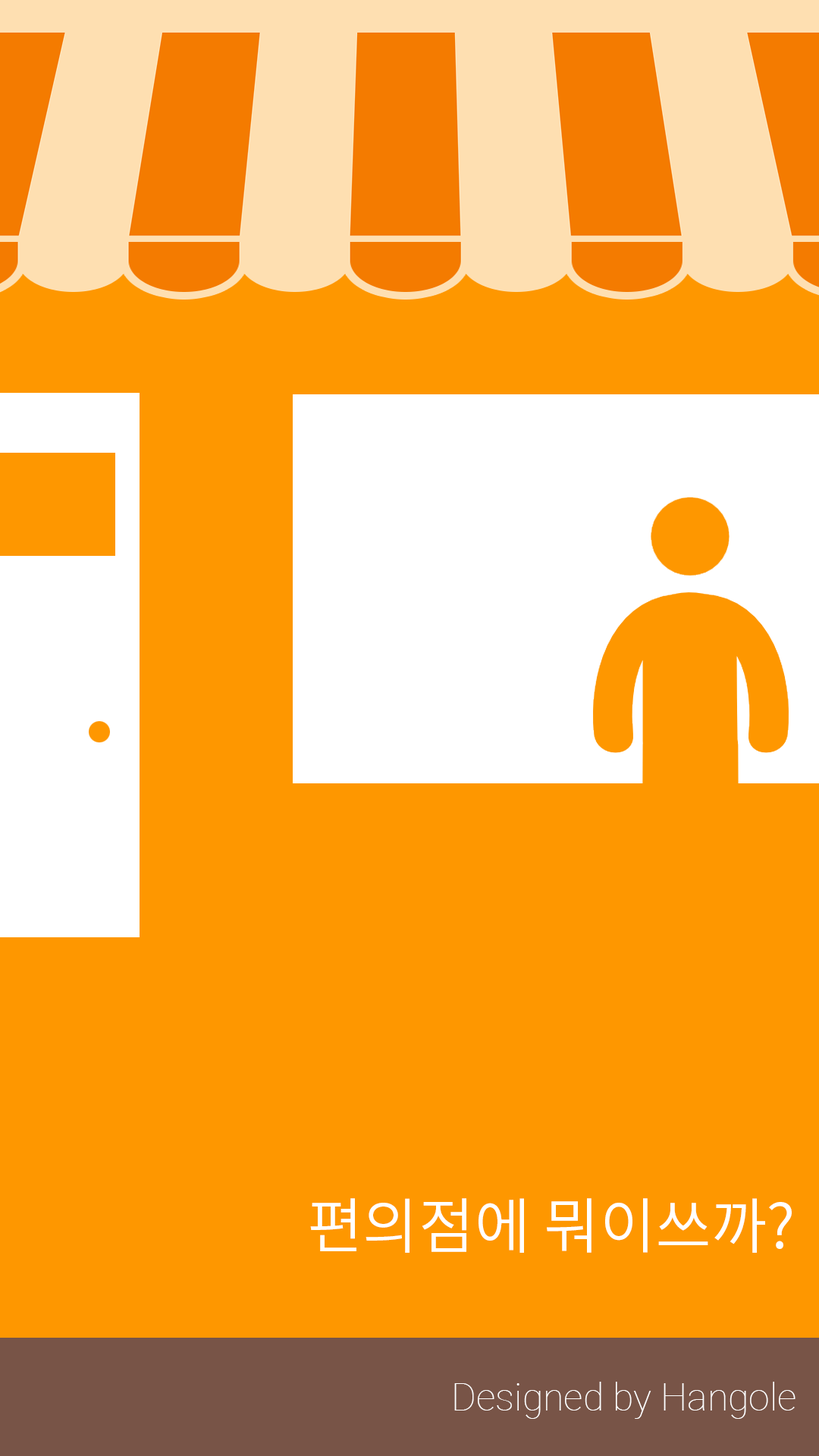
<style>
.page{position:relative;width:819px;height:1456px;background:#fe9700}
.page>*{position:absolute;margin:0}
.t1{font:60.7px "NotoSansCJKkr-DemiLight";color:#ffffff}
.t2{font:37.9px "Roboto-Thin";color:#ffffff}
</style>
<div class="page">
<p class="t1" style="left:310px;top:1198px;width:482px;height:55px">편의점에 뭐이쓰까?</p>
<p class="t2" style="left:454px;top:1382px;width:341px;height:37px">Designed by Hangole</p>
</div>
